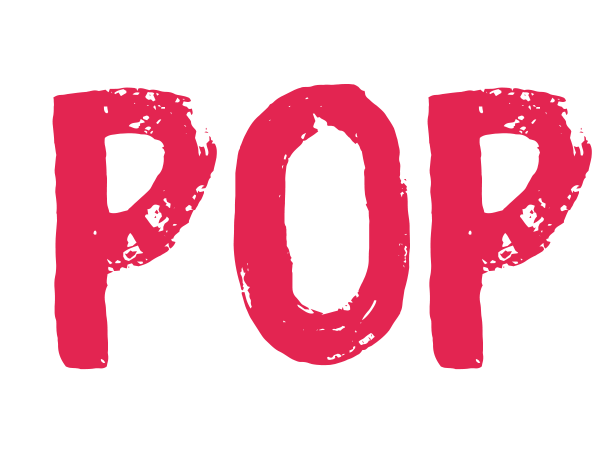
<style>
.page{position:relative;width:600px;height:450px;background:#ffffff}
.page>*{position:absolute;margin:0}
.t1{font:433.3px "FibreVintage";color:#e32551}
</style>
<div class="page">
<p class="t1" style="left:52px;top:84px;width:540px;height:286px">POP</p>
</div>
